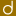
<style>
.page{position:relative;width:16px;height:16px;background:#9a7000}
.page>*{position:absolute;margin:0}
.t1{font:18px "TimeBurner";color:#fffcf4}
</style>
<div class="page">
<p class="t1" style="left:3px;top:0px;width:10px;height:15px">d</p>
</div>
